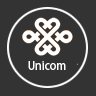
<style>
.page{position:relative;width:96px;height:96px;background:#333333}
.page>*{position:absolute;margin:0}
.t1{font:11px "AdobeHeitiStd-Regular";color:#ffffff}
</style>
<div class="page">
<p class="t1" style="left:28px;top:61px;width:38px;height:9px">Unicom</p>
</div>
